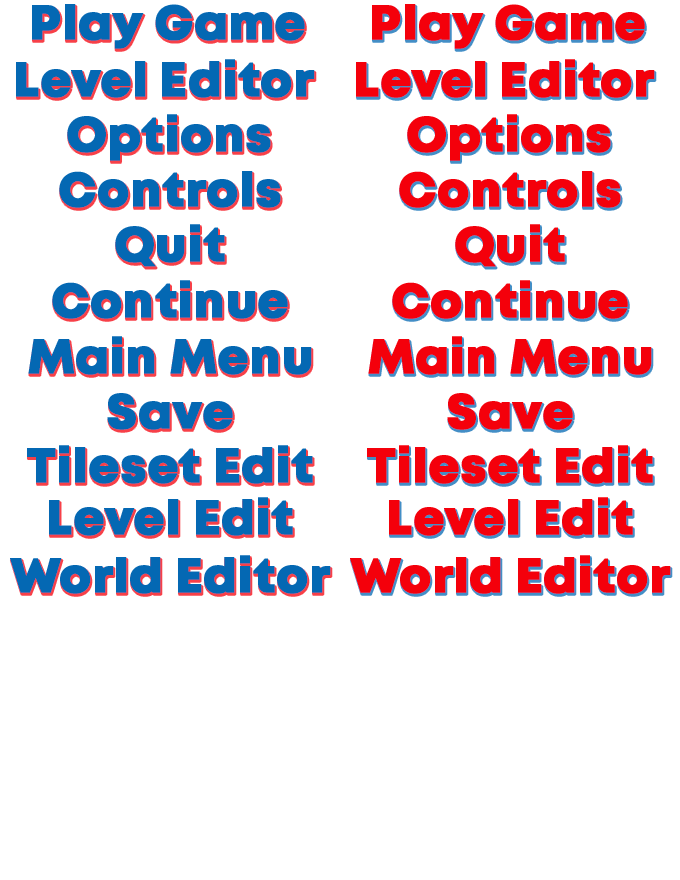
<style>
.page{position:relative;width:680px;height:880px;background:#ffffff}
.page>*{position:absolute;margin:0}
.t1{font:48px "Mont-HeavyDEMO";color:#0468b3;font-weight:bold}
.t2{font:48px "Mont-HeavyDEMO";color:#f4000b;font-weight:bold}
</style>
<div class="page">
<p class="t1" style="left:32px;top:4px;width:273px;height:45px">Play Game</p>
<p class="t2" style="left:372px;top:4px;width:273px;height:45px">Play Game</p>
<p class="t1" style="left:16px;top:59px;width:299px;height:39px">Level Editor</p>
<p class="t2" style="left:356px;top:59px;width:299px;height:39px">Level Editor</p>
<p class="t1" style="left:67px;top:114px;width:204px;height:47px">Options</p>
<p class="t2" style="left:407px;top:114px;width:204px;height:47px">Options</p>
<p class="t1" style="left:59px;top:171px;width:222px;height:37px">Controls</p>
<p class="t2" style="left:399px;top:171px;width:222px;height:37px">Controls</p>
<p class="t1" style="left:115px;top:224px;width:110px;height:43px">Quit</p>
<p class="t2" style="left:455px;top:224px;width:110px;height:43px">Quit</p>
<p class="t1" style="left:52px;top:280px;width:236px;height:39px">Continue</p>
<p class="t2" style="left:392px;top:280px;width:236px;height:39px">Continue</p>
<p class="t1" style="left:28px;top:336px;width:284px;height:39px">Main Menu</p>
<p class="t2" style="left:368px;top:336px;width:284px;height:39px">Main Menu</p>
<p class="t1" style="left:107px;top:393px;width:126px;height:37px">Save</p>
<p class="t2" style="left:447px;top:393px;width:126px;height:37px">Save</p>
<p class="t1" style="left:27px;top:445px;width:286px;height:39px">Tileset Edit</p>
<p class="t2" style="left:367px;top:445px;width:286px;height:39px">Tileset Edit</p>
<p class="t1" style="left:49px;top:497px;width:244px;height:39px">Level Edit</p>
<p class="t2" style="left:389px;top:497px;width:244px;height:39px">Level Edit</p>
<p class="t1" style="left:10px;top:555px;width:321px;height:39px">World Editor</p>
<p class="t2" style="left:350px;top:555px;width:321px;height:39px">World Editor</p>
</div>
